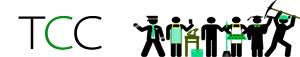
<style>
.page{position:relative;width:300px;height:57px;background:#ffffff}
.page>*{position:absolute;margin:0}
.t1{font:48px "Santana";letter-spacing:0.025em;color:#000000}
.t2{font:48px "Santana";letter-spacing:0.025em;color:#088c18}
</style>
<div class="page">
<p class="t1" style="left:18px;top:16px;width:84px;height:34px">T<span class="t2">C</span>C</p>
</div>
